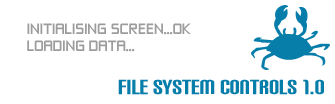
<style>
.page{position:relative;width:335px;height:104px;background:#ffffff}
.page>*{position:absolute;margin:0}
.t1{font:14px "ZeroThrees";color:#9c9c9c}
.t2{font:24px "CarbonBlock";color:#077da9}
</style>
<div class="page">
<p class="t1" style="left:27px;top:23px;width:164px;height:29px">INITIALISING SCREEN...OK<br>LOADING DATA...</p>
<p class="t2" style="left:118px;top:79px;width:206px;height:16px">File System Controls 1.0</p>
</div>
